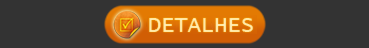
<style>
.page{position:relative;width:369px;height:48px;background:#333333}
.page>*{position:absolute;margin:0}
.t1{font:22px "LucidaConsole";color:#ffe7a3}
</style>
<div class="page">
<p class="t1" style="left:149px;top:18px;width:104px;height:14px">DETALHES</p>
</div>
